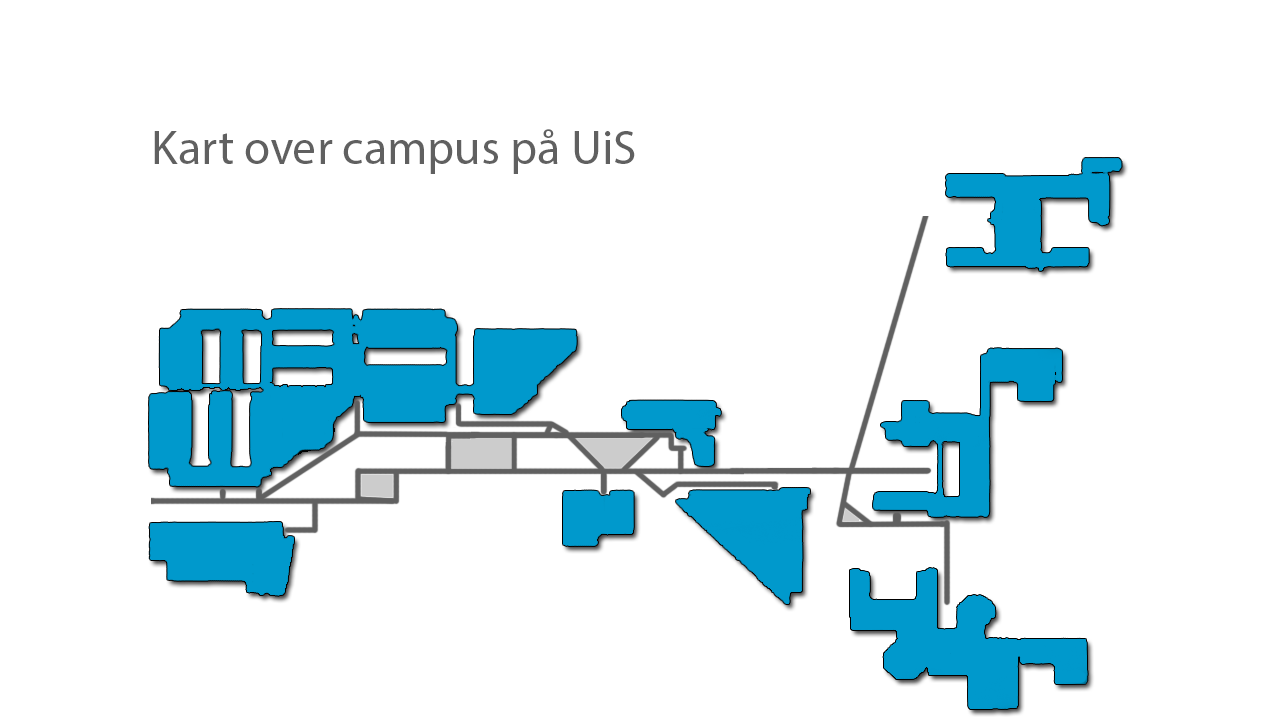
<style>
.page{position:relative;width:1280px;height:720px;background:#ffffff}
.page>*{position:absolute;margin:0}
.t1{font:48px "MyriadPro-Regular";color:#606060}
</style>
<div class="page">
<p class="t1" style="left:154px;top:129px;width:481px;height:45px">Kart over campus på UiS</p>
</div>
